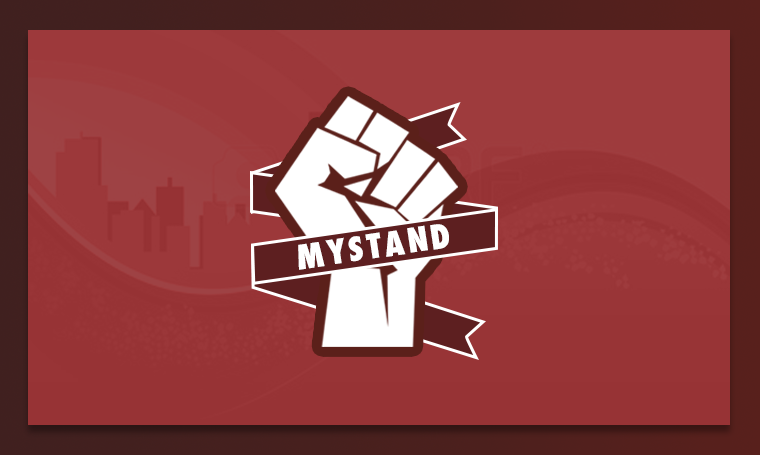
<style>
.page{position:relative;width:760px;height:455px}
.page>*{position:absolute;margin:0}
.t1{font:32.9px "Futura-CondensedExtraBold";letter-spacing:0.1em;color:#ffffff;text-transform:uppercase}
</style>
<div class="page">
<p class="t1" style="left:298px;top:224px;width:151px;height:46px;rotate:-8deg">MYSTAND</p>
</div>
